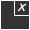
<style>
.page{position:relative;width:30px;height:30px;background:#333333}
.page>*{position:absolute;margin:0}
.t1{font:12px "Airstream";color:#ffffff}
</style>
<div class="page">
<p class="t1" style="left:17px;top:3px;width:10px;height:9px">X</p>
</div>
